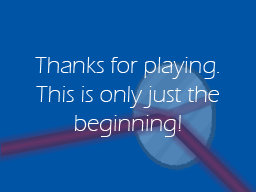
<style>
.page{position:relative;width:256px;height:192px;background:#0054a6}
.page>*{position:absolute;margin:0}
.t1{font:24px "ErasITC-Light";color:#ffffff}
</style>
<div class="page">
<p class="t1" style="left:35px;top:57px;width:184px;height:80px;text-align:center">Thanks for playing.<br>This is only just the<br>beginning!</p>
</div>
